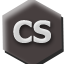
<style>
.page{position:relative;width:64px;height:64px}
.page>*{position:absolute;margin:0}
.t1{font:30px "Tahoma-Bold";color:#cfcfcf}
</style>
<div class="page">
<p class="t1" style="left:13px;top:20px;width:38px;height:23px">CS</p>
</div>
